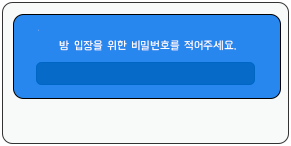
<style>
.page{position:relative;width:291px;height:146px;background:#f8faf9}
.page>*{position:absolute;margin:0}
.t1{font:12px "BMHANNAAirOTF";letter-spacing:0.012em;color:#ffffff}
</style>
<div class="page">
<p class="t1" style="left:59px;top:40px;width:177px;height:11px">방 입장을 위한 비밀번호를 적어주세요.</p>
</div>
